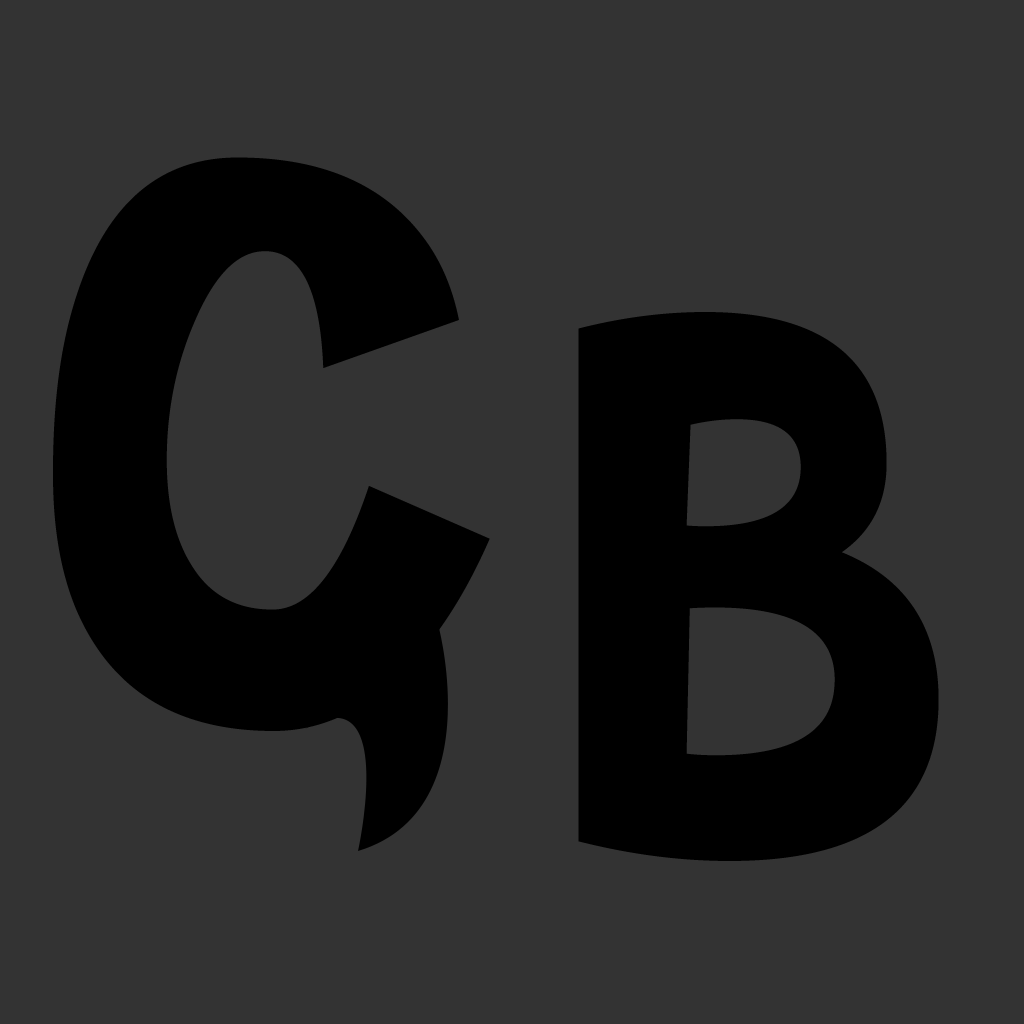
<style>
.page{position:relative;width:1024px;height:1024px;background:#333333}
.page>*{position:absolute;margin:0}
.t1{font:787.5px "Cheri";color:#000000}
</style>
<div class="page">
<p class="t1" style="left:53px;top:157px;width:437px;height:574px">C</p>
<p class="t1" style="left:578px;top:312px;width:361px;height:549px">B</p>
</div>
